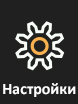
<style>
.page{position:relative;width:78px;height:104px;background:#202020}
.page>*{position:absolute;margin:0}
.t1{font:12px "Calibri-Bold";color:#ffffff}
</style>
<div class="page">
<p class="t1" style="left:3px;top:83px;width:73px;height:14px">Настройки</p>
</div>
